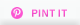
<style>
.page{position:relative;width:80px;height:25px;background:#f8fafa}
.page>*{position:absolute;margin:0}
.t1{font:10px "Arial-BoldMT";color:#fc54d2}
</style>
<div class="page">
<p class="t1" style="left:32px;top:9px;width:35px;height:8px">PINT IT</p>
</div>
